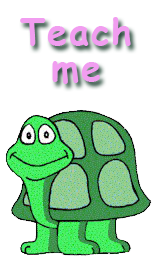
<style>
.page{position:relative;width:159px;height:265px;background:#ffffff}
.page>*{position:absolute;margin:0}
.t1{font:36px/36px "ComicSansMS-Bold";letter-spacing:0.05em;color:#f19df0}
</style>
<div class="page">
<p class="t1" style="left:20px;top:17px;width:111px;height:67px;text-align:center">Teach<br>me</p>
</div>
